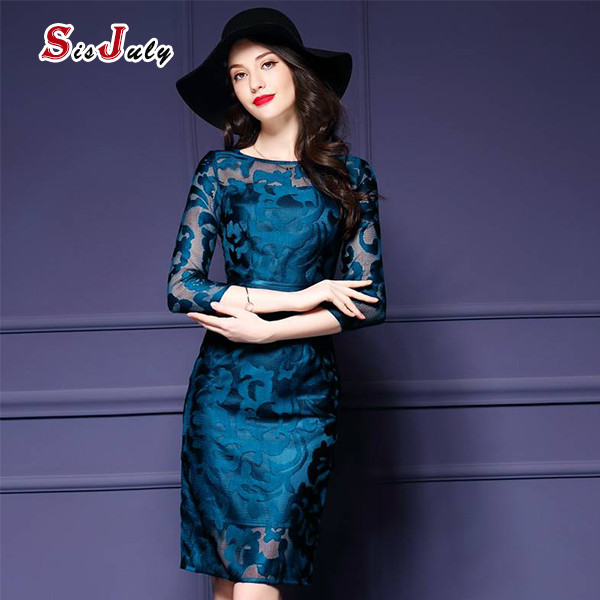
<style>
.page{position:relative;width:600px;height:600px}
.page>*{position:absolute;margin:0}
.t1{font:28.6px "BrushScriptStd";letter-spacing:0.11em;color:#0a0a0a;font-weight:bold}
.t2{font:47.6px "Algerian";letter-spacing:0.11em;color:#b10414;font-weight:bold;font-style:italic}
.t3{font:28.6px "BrushScriptMT";letter-spacing:0.11em;color:#0a0a0a;font-weight:bold}
</style>
<div class="page">
<p class="t1" style="left:41px;top:26px;width:130px;height:39px"><span class="t2">S</span><span class="t3">is</span><span class="t2">J</span>uly</p>
</div>
